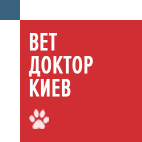
<style>
.page{position:relative;width:142px;height:142px;background:#d12e33}
.page>*{position:absolute;margin:0}
.t1{font:25px "ProximaNovaExCn-Regular";color:#fefefe;font-weight:bold}
</style>
<div class="page">
<p class="t1" style="left:29px;top:33px;width:28px;height:18px">ВЕТ</p>
<p class="t1" style="left:28px;top:56px;width:65px;height:21px">ДОКТОР</p>
<p class="t1" style="left:29px;top:79px;width:42px;height:18px">КИЕВ</p>
</div>
